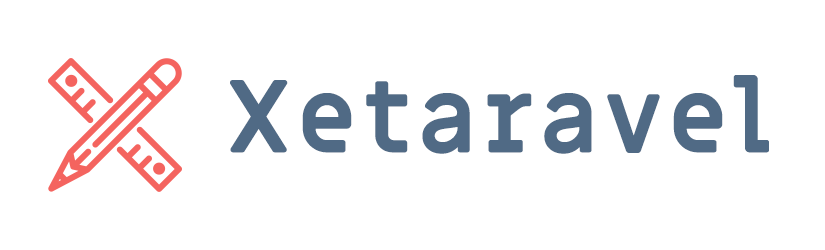
<style>
.page{position:relative;width:825px;height:250px;background:#ffffff}
.page>*{position:absolute;margin:0}
.t1{font:100px "MiriamLibre-Bold";letter-spacing:0.05em;color:#506a85;font-weight:bold}
</style>
<div class="page">
<p class="t1" style="left:230px;top:75px;width:539px;height:79px">Xetaravel</p>
</div>
